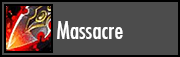
<style>
.page{position:relative;width:180px;height:57px;background:#4c4c4c}
.page>*{position:absolute;margin:0}
.t1{font:24px "FuturaCondensed";color:#ffffff}
</style>
<div class="page">
<p class="t1" style="left:57px;top:21px;width:66px;height:18px">Massacre</p>
</div>
